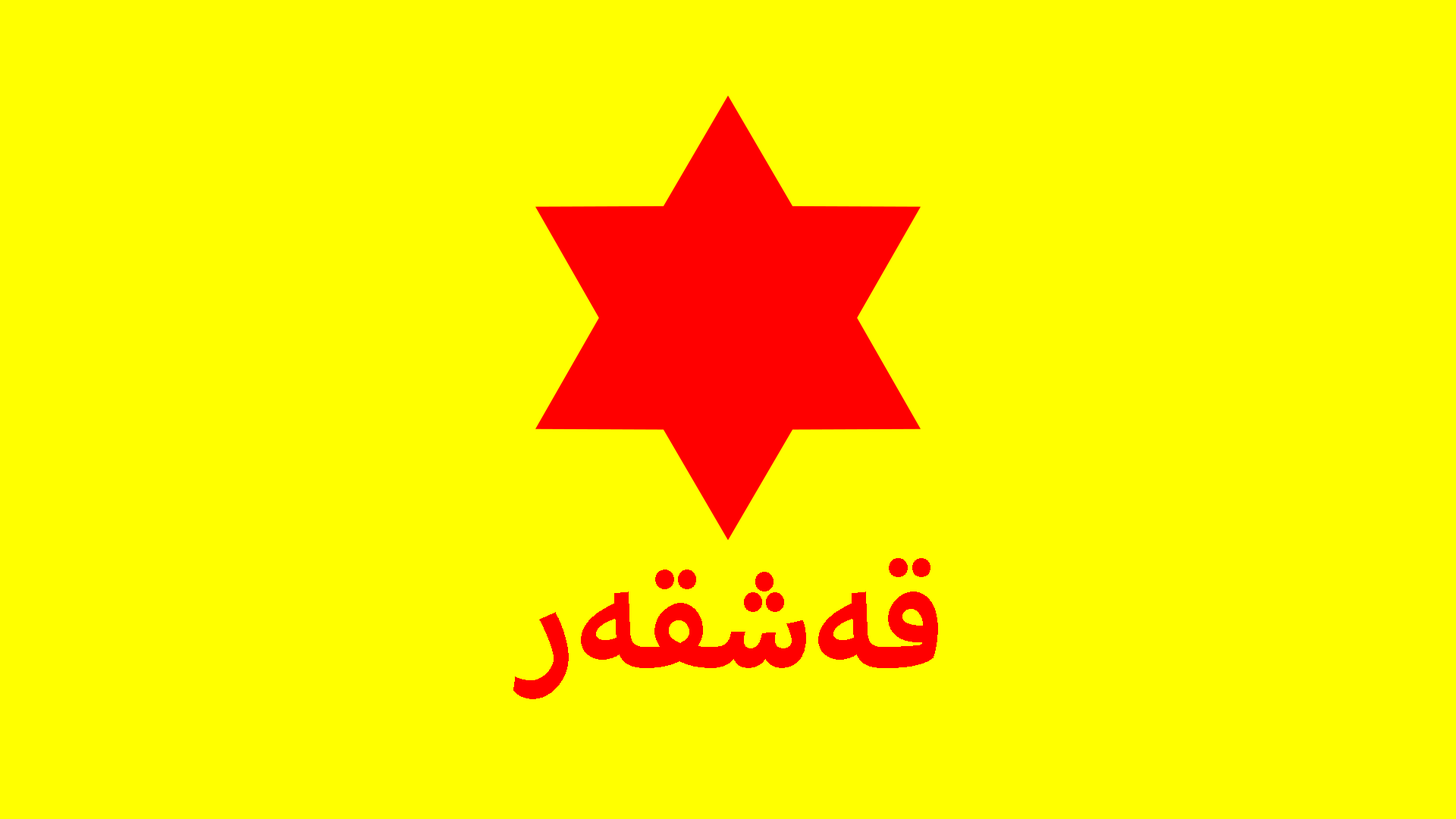
<style>
.page{position:relative;width:1456px;height:819px;background:#ffff00}
.page>*{position:absolute;margin:0}
.t1{font:189.5px "MyriadArabic-Bold";color:#ff0000}
</style>
<div class="page">
<p class="t1" style="left:513px;top:558px;width:425px;height:141px">قەشقەر</p>
</div>
